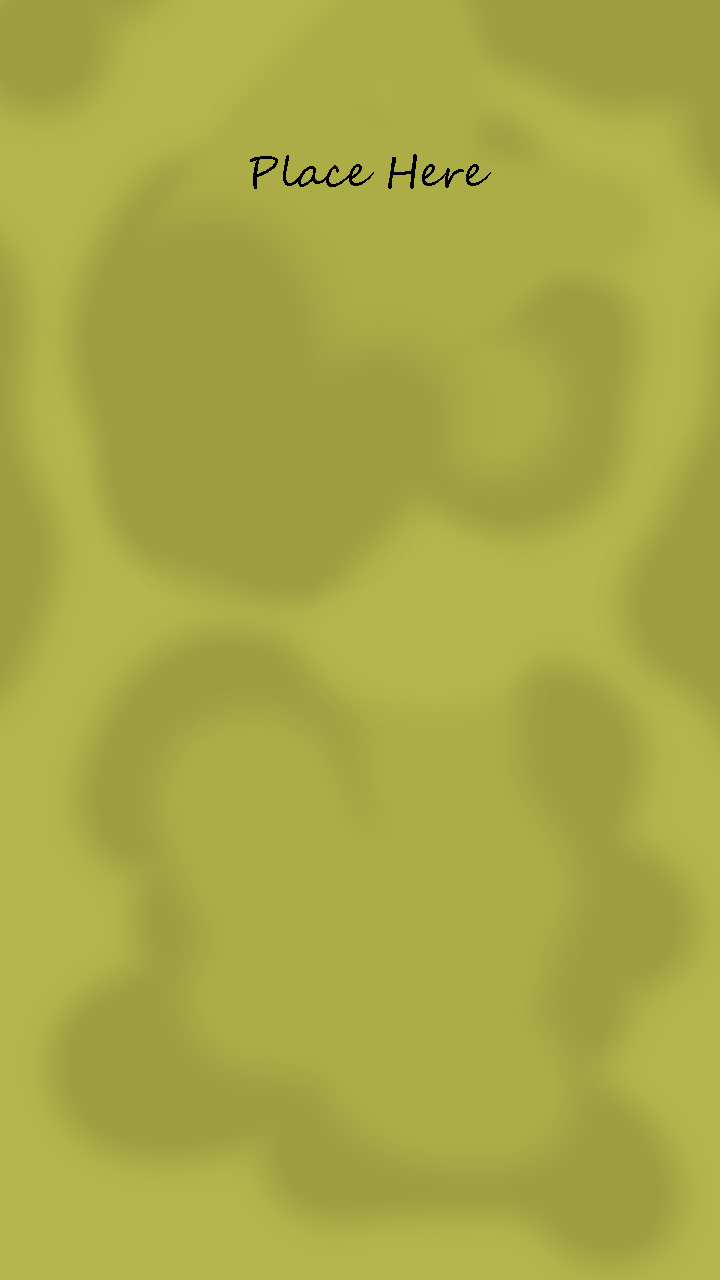
<style>
.page{position:relative;width:720px;height:1280px;background:#acad47}
.page>*{position:absolute;margin:0}
.t1{font:41.7px "SegoeScript";color:#000000}
</style>
<div class="page">
<p class="t1" style="left:250px;top:154px;width:241px;height:35px">Place Here</p>
</div>
